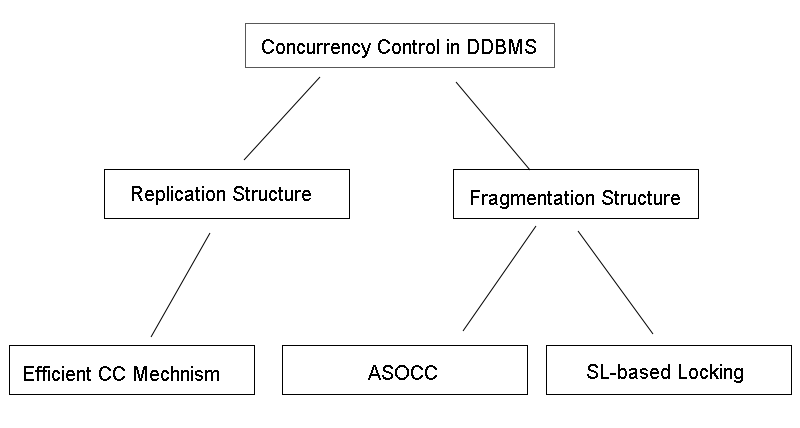
<style>
.page{position:relative;width:800px;height:428px;background:#ffffff}
.page>*{position:absolute;margin:0}
.t1{font:20px "ArialMT";color:#000000}
</style>
<div class="page">
<p class="t1" style="left:262px;top:39px;width:274px;height:19px">Concurrency Control in DDBMS</p>
<p class="t1" style="left:132px;top:186px;width:179px;height:19px">Replication Structure</p>
<p class="t1" style="left:471px;top:190px;width:209px;height:19px">Fragmentation Structure</p>
<p class="t1" style="left:24px;top:366px;width:195px;height:15px">Efficient CC Mechnism</p>
<p class="t1" style="left:368px;top:365px;width:69px;height:15px">ASOCC</p>
<p class="t1" style="left:587px;top:364px;width:156px;height:19px">SL-based Locking</p>
</div>
